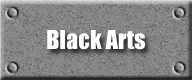
<style>
.page{position:relative;width:192px;height:80px}
.page>*{position:absolute;margin:0}
.t1{font:24px "Impact";color:#ffffff}
</style>
<div class="page">
<p class="t1" style="left:47px;top:30px;width:98px;height:20px">Black Arts</p>
</div>
